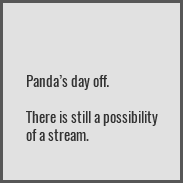
<style>
.page{position:relative;width:183px;height:183px;background:#e1e1e1}
.page>*{position:absolute;margin:0}
.t1{font:15px "Oswald-Regular";color:#333333}
</style>
<div class="page">
<p class="t1" style="left:26px;top:75px;width:132px;height:66px">Panda’s day off.<br><br>There is still a possibility<br>of a stream.</p>
</div>
